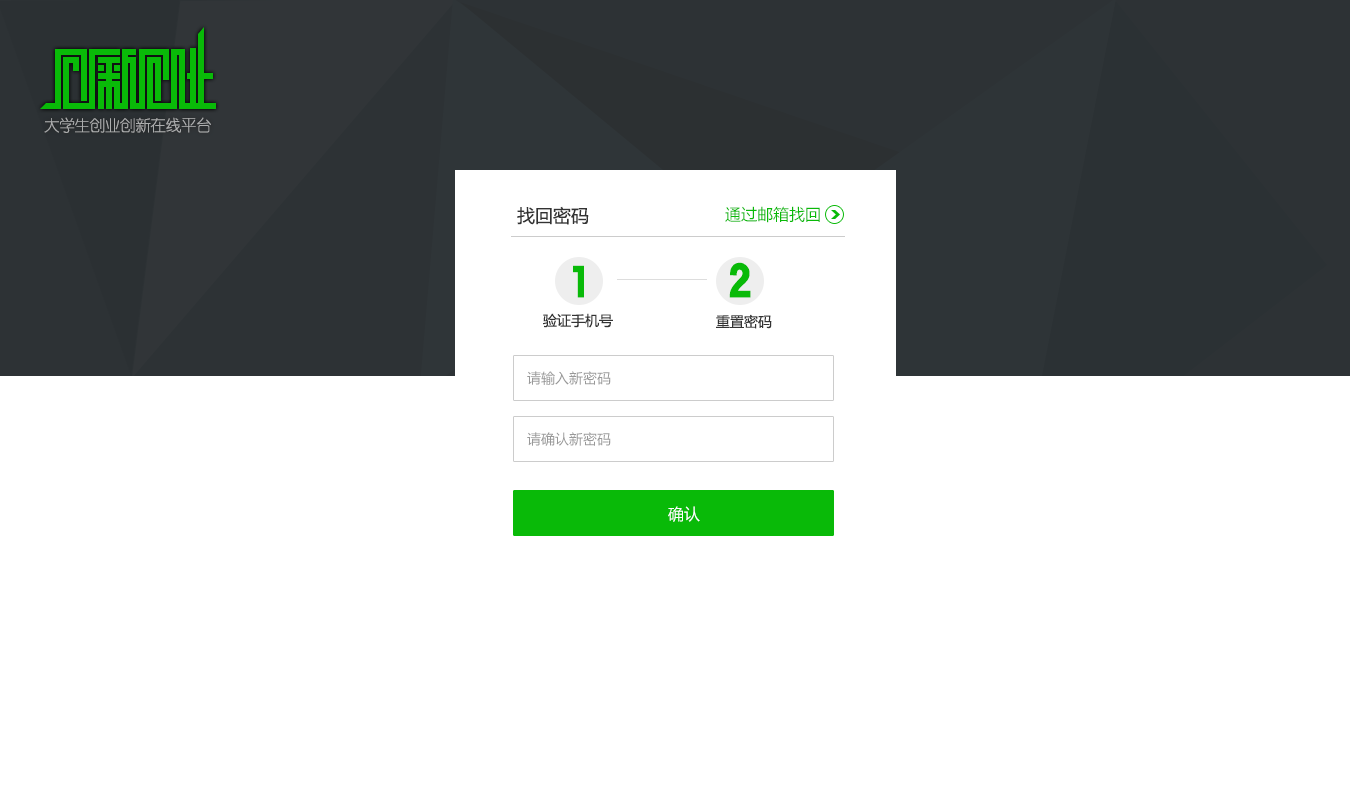
<style>
.page{position:relative;width:1350px;height:800px;background:#ffffff}
.page>*{position:absolute;margin:0}
.t1{font:16px "YouYuan";letter-spacing:-0.05em;color:#abadad}
.t2{font:18px "MicrosoftYaHei";color:#333333}
.t3{font:16px "MicrosoftYaHei";color:#09ba08}
.t4{font:50px "HYk1gj";color:#09ba08}
.t5{font:50px "HYb9gf";color:#09ba08}
.t6{font:14px "MicrosoftYaHei";color:#333333}
.t7{font:14px "MicrosoftYaHei";color:#999999}
.t8{font:16px "MicrosoftYaHei";color:#ffffff}
</style>
<div class="page">
<p class="t1" style="left:44px;top:117px;width:167px;height:16px">大学生创业创新在线平台</p>
<p class="t2" style="left:517px;top:206px;width:72px;height:19px">找回密码</p>
<p class="t3" style="left:725px;top:206px;width:95px;height:17px">通过邮箱找回</p>
<p class="t4" style="left:573px;top:265px;width:11px;height:33px">1</p>
<p class="t5" style="left:729px;top:262px;width:22px;height:36px">2</p>
<p class="t6" style="left:543px;top:313px;width:70px;height:15px">验证手机号</p>
<p class="t6" style="left:716px;top:314px;width:56px;height:15px">重置密码</p>
<p class="t7" style="left:527px;top:371px;width:84px;height:14px">请输入新密码</p>
<p class="t7" style="left:527px;top:432px;width:84px;height:14px">请确认新密码</p>
<p class="t8" style="left:668px;top:506px;width:32px;height:16px">确认</p>
</div>
